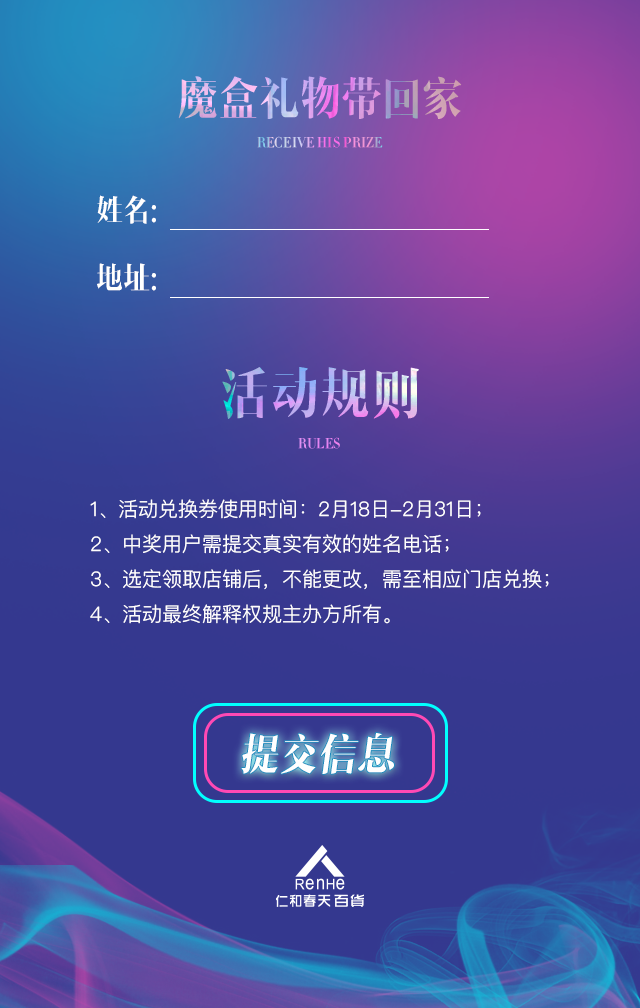
<style>
.page{position:relative;width:640px;height:1008px}
.page>*{position:absolute;margin:0}
.t1{font:45.4px "MFShangYa_Noncommercial-Regular";scale:0.9 1}
.t2{font:14px "MFShangYa_Noncommercial-Regular";text-transform:uppercase;scale:0.9 1}
.t3{font:30px "MFShangYa_Noncommercial-Regular";color:#ffffff;scale:0.9 1}
.t4{font:55.4px "MFShangYa_Noncommercial-Regular";scale:0.9 1}
.t5{font:14px "MFShangYa_Noncommercial-Regular";color:#e387f1;text-transform:uppercase;scale:0.9 1}
.t6{font:20px "PingFangSC-Light";color:#fffefe}
.t7{font:43.7px "MFShangYa_Noncommercial-Regular";color:#ffffff;scale:0.89 1}
</style>
<div class="page">
<p class="t1" style="left:178px;top:76px;width:284px;height:43px">魔盒礼物带回家</p>
<p class="t2" style="left:257px;top:136px;width:126px;height:12px">receive his prize</p>
<p class="t3" style="left:97px;top:195px;width:59px;height:29px">姓名：</p>
<p class="t3" style="left:97px;top:263px;width:59px;height:28px">地址：</p>
<p class="t4" style="left:222px;top:367px;width:197px;height:52px">活动规则</p>
<p class="t5" style="left:298px;top:437px;width:42px;height:12px">RULES</p>
<p class="t6" style="left:90px;top:499px;width:459px;height:125px">1、活动兑换券使用时间：2月18日-2月31日；<br>2、中奖用户需提交真实有效的姓名电话；<br>3、选定领取店铺后，不能更改，需至相应门店兑换；<br>4、活动最终解释权规主办方所有。</p>
<p class="t7" style="left:241px;top:733px;width:153px;height:41px">提交信息</p>
</div>
